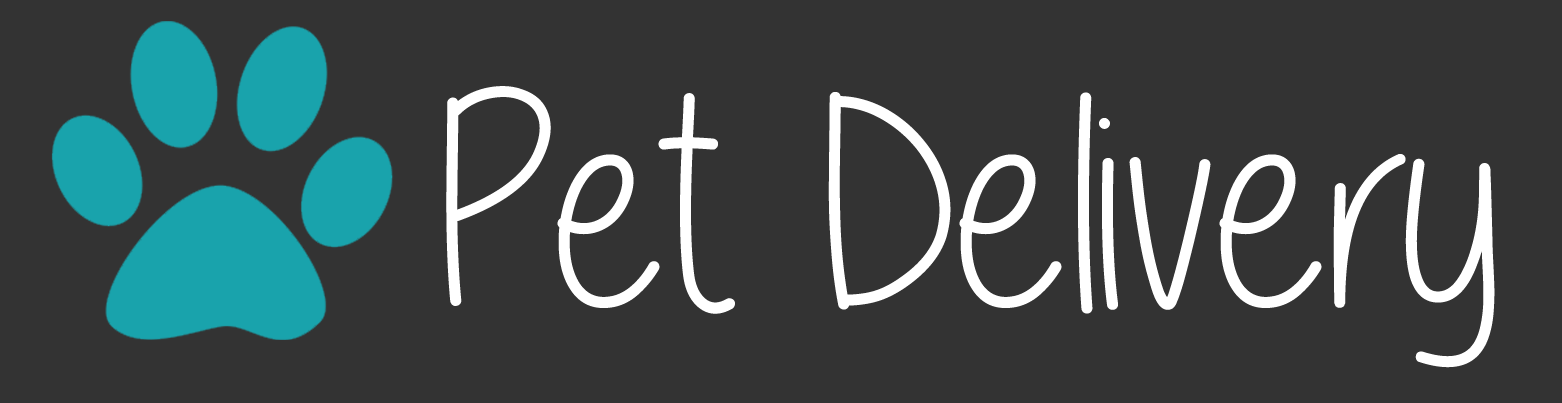
<style>
.page{position:relative;width:1562px;height:403px;background:#333333}
.page>*{position:absolute;margin:0}
.t1{font:299px "Alittlesunshine";color:#ffffff}
</style>
<div class="page">
<p class="t1" style="left:446px;top:86px;width:1049px;height:282px">Pet Delivery</p>
</div>
